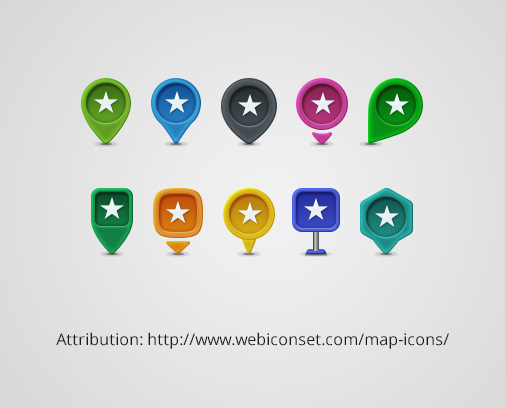
<style>
.page{position:relative;width:505px;height:408px}
.page>*{position:absolute;margin:0}
.t1{font:16px "OpenSans";color:#1a1a1a}
</style>
<div class="page">
<p class="t1" style="left:56px;top:332px;width:393px;height:17px">Attribution: http://www.webiconset.com/map-icons/</p>
</div>
